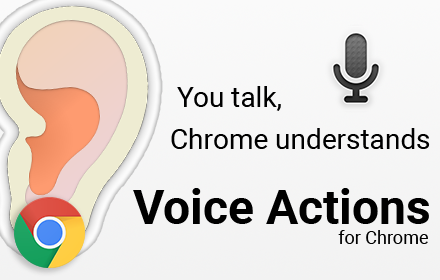
<style>
.page{position:relative;width:440px;height:280px}
.page>*{position:absolute;margin:0}
.t1{font:28px/41.5px "Roboto-Regular";color:#000000}
.t2{font:48px/20px "Roboto-Bold";color:#000000}
.t3{font:18px/20px "Roboto-Regular";color:#000000}
</style>
<div class="page">
<p class="t1" style="left:171px;top:86px;width:259px;height:63px">You talk,<br>Chrome understands</p>
<p class="t2" style="left:133px;top:188px;width:296px;height:56px;text-align:right">Voice Actions<br><span class="t3">for Chrome</span></p>
</div>
